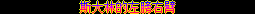
<style>
.page{position:relative;width:255px;height:14px;background:#000000}
.page>*{position:absolute;margin:0}
.t1{font:12px "SimSun"}
</style>
<div class="page">
<p class="t1" style="left:80px;top:2px;width:95px;height:12px">斯大林的左膀右臂</p>
</div>
